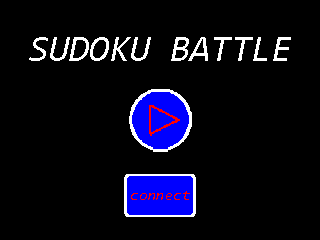
<style>
.page{position:relative;width:320px;height:240px;background:#000000}
.page>*{position:absolute;margin:0}
.t1{font:36.7px "Consolas-Italic";color:#ffffff}
.t2{font:15.3px "Consolas-Italic";color:#ff0000}
</style>
<div class="page">
<p class="t1" style="left:29px;top:37px;width:262px;height:24px">SUDOKU BATTLE</p>
<p class="t2" style="left:131px;top:191px;width:59px;height:9px">connect</p>
</div>
